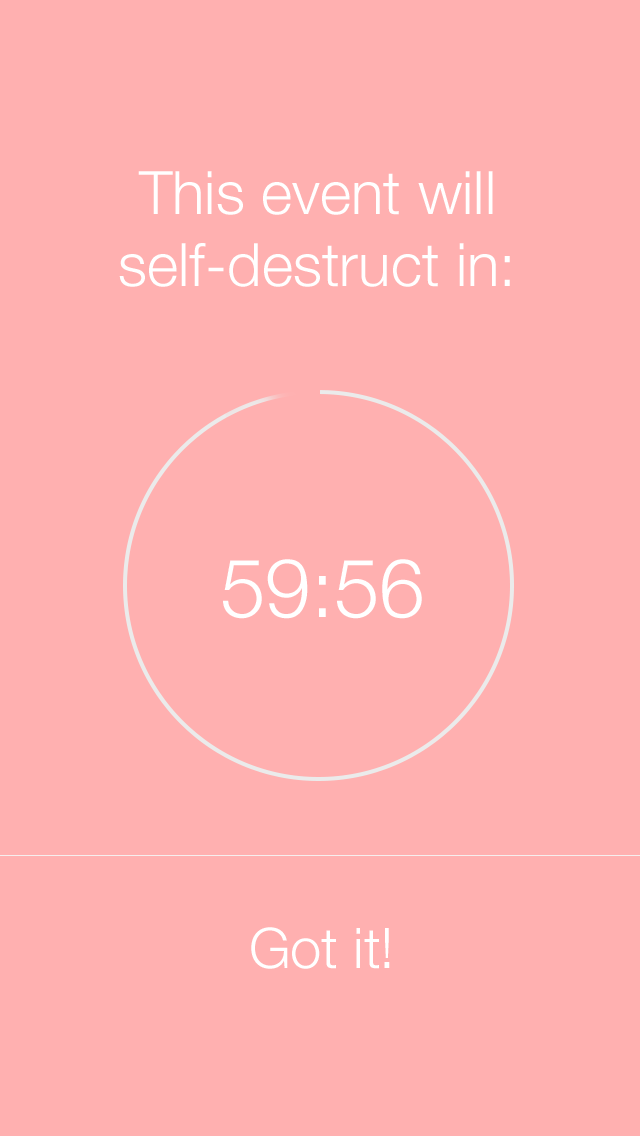
<style>
.page{position:relative;width:640px;height:1136px;background:#ffb0b0}
.page>*{position:absolute;margin:0}
.t1{font:60px "HelveticaNeue-Light";color:#ffffff}
.t2{font:81.8px "HelveticaNeue-Light";color:#ffffff}
.t3{font:56px "HelveticaNeue-Light";color:#ffffff}
</style>
<div class="page">
<p class="t1" style="left:119px;top:171px;width:391px;height:116px;text-align:center">This event will self-destruct in:</p>
<p class="t2" style="left:223px;top:559px;width:199px;height:60px">59:56</p>
<p class="t3" style="left:251px;top:927px;width:139px;height:42px">Got it!</p>
</div>
